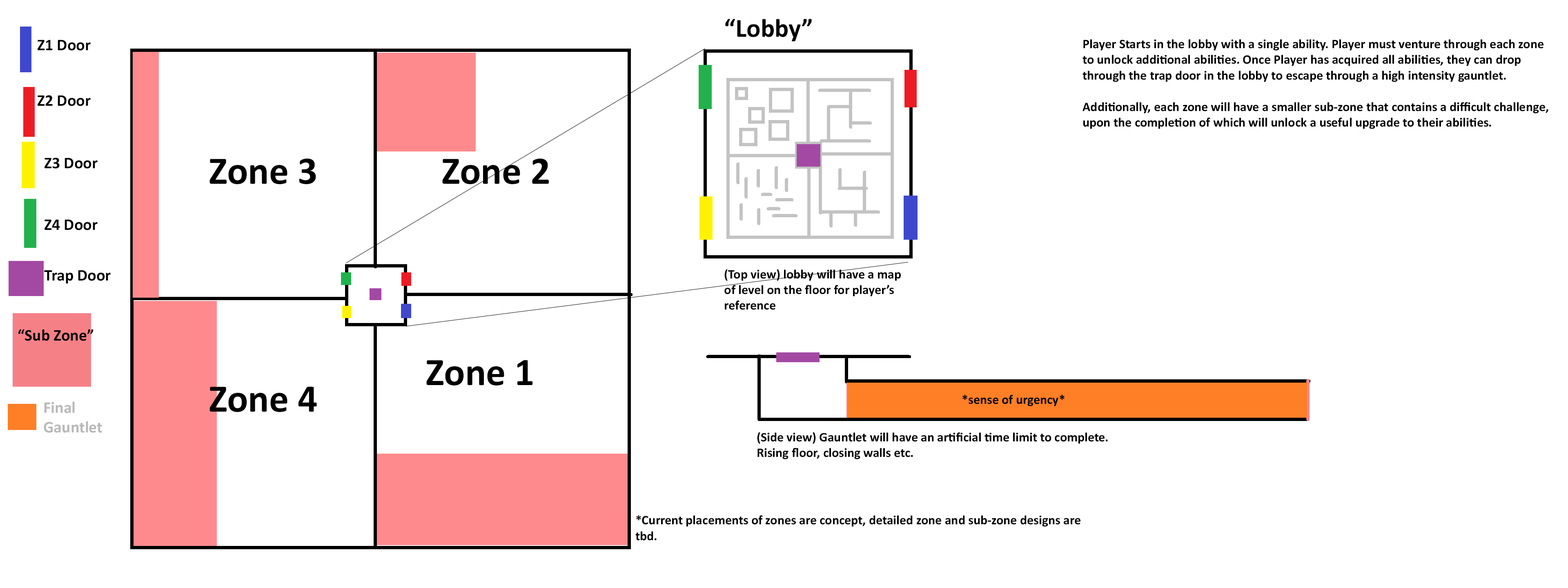
<style>
.page{position:relative;width:1568px;height:588px;background:#ffffff}
.page>*{position:absolute;margin:0}
.t1{font:26.1px "Calibri-Bold";color:#000000}
.t2{font:16.3px "Calibri-Bold";color:#000000}
.t3{font:13.1px "Calibri-Bold";color:#000000}
.t4{font:39.2px "Calibri-Bold";color:#000000}
.t5{font:16.3px "Calibri-Bold";color:#b8b8b8}
</style>
<div class="page">
<p class="t1" style="left:725px;top:19px;width:87px;height:23px">“Lobby”</p>
<p class="t2" style="left:38px;top:40px;width:53px;height:11px">Z1 Door</p>
<p class="t3" style="left:1082px;top:39px;width:466px;height:90px">Player Starts in the lobby with a single ability. Player must venture through each zone to unlock additional abilities. Once Player has acquired all abilities, they can drop through the trap door in the lobby to escape through a high intensity gauntlet.<br><br>Additionally, each zone will have a smaller sub-zone that contains a difficult challenge, upon the completion of which will unlock a useful upgrade to their abilities.</p>
<p class="t2" style="left:38px;top:95px;width:53px;height:11px">Z2 Door</p>
<p class="t2" style="left:45px;top:158px;width:53px;height:11px">Z3 Door</p>
<p class="t4" style="left:209px;top:158px;width:107px;height:26px">Zone 3</p>
<p class="t4" style="left:442px;top:158px;width:107px;height:26px">Zone 2</p>
<p class="t2" style="left:45px;top:219px;width:53px;height:11px">Z4 Door</p>
<p class="t2" style="left:44px;top:270px;width:67px;height:14px">Trap Door</p>
<p class="t3" style="left:724px;top:269px;width:177px;height:41px">(Top view) lobby will have a map of level on the floor for player’s reference</p>
<p class="t2" style="left:18px;top:329px;width:76px;height:12px">“Sub Zone”</p>
<p class="t4" style="left:426px;top:360px;width:107px;height:25px">Zone 1</p>
<p class="t4" style="left:209px;top:387px;width:108px;height:25px">Zone 4</p>
<p class="t5" style="left:44px;top:401px;width:58px;height:32px">Final Gauntlet</p>
<p class="t3" style="left:962px;top:394px;width:103px;height:12px">*sense of urgency*</p>
<p class="t3" style="left:757px;top:432px;width:351px;height:27px">(Side view) Gauntlet will have an artificial time limit to complete. Rising floor, closing walls etc.</p>
<p class="t3" style="left:635px;top:515px;width:445px;height:26px">*Current placements of zones are concept, detailed zone and sub-zone designs are tbd.</p>
</div>
